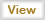
<style>
.page{position:relative;width:45px;height:20px;background:#ffffff}
.page>*{position:absolute;margin:0}
.t1{font:12.3px "ArialRoundedMTBold";color:#a77e24}
</style>
<div class="page">
<p class="t1" style="left:7px;top:5px;width:29px;height:9px">View</p>
</div>
